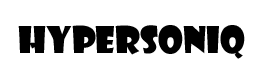
<style>
.page{position:relative;width:265px;height:77px;background:#ffffff}
.page>*{position:absolute;margin:0}
.t1{font:36px "ShowcardGothic-Reg";color:#000000}
</style>
<div class="page">
<p class="t1" style="left:18px;top:25px;width:227px;height:34px">HYPERSONIQ</p>
</div>
